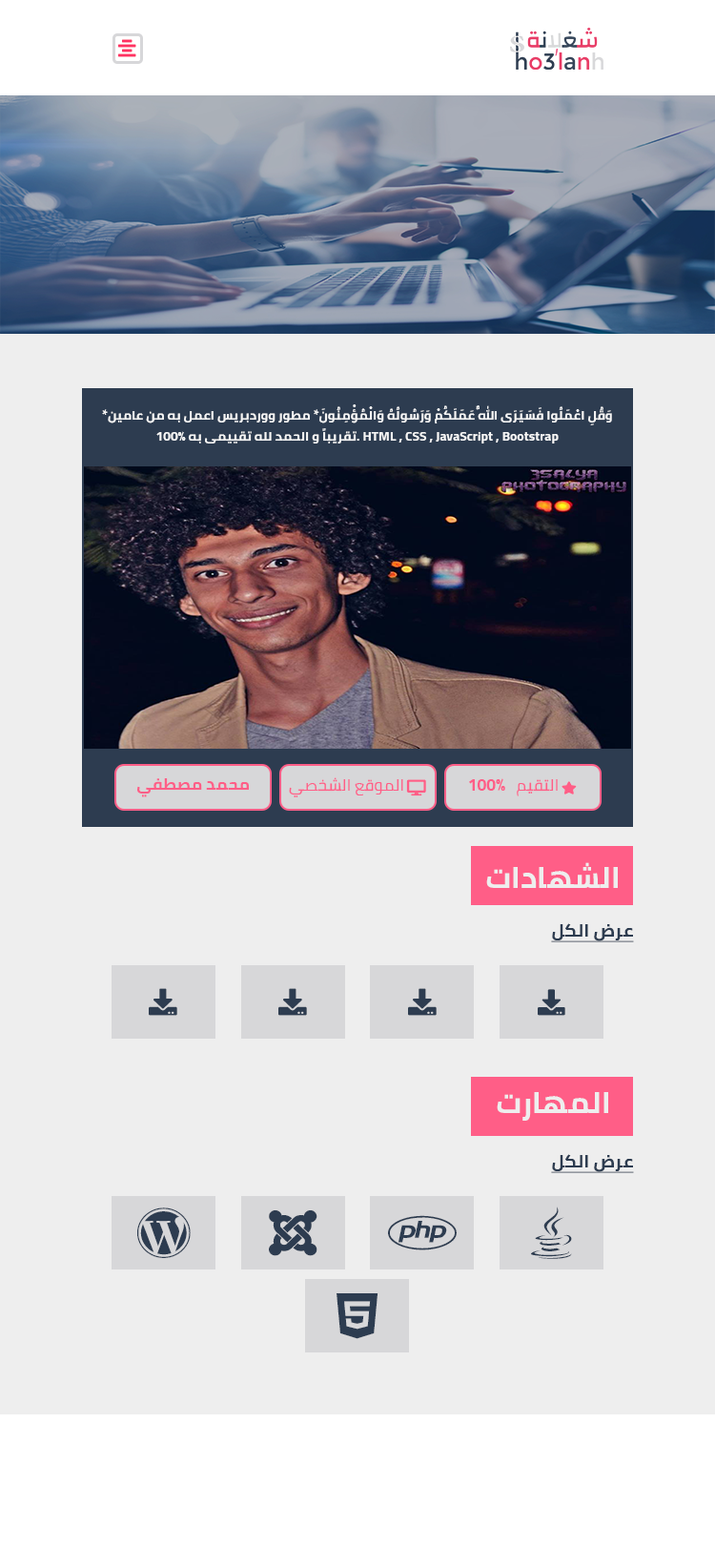
<style>
.page{position:relative;width:715px;height:1568px;background:#eeeeee}
.page>*{position:absolute;margin:0}
.t1{font:12.4px/21px "Cairo-Bold";color:#f7f7f7;scale:1.06 1}
.t2{font:15.7px "Cairo-Bold";color:#ff5e87;scale:1.06 1}
.t3{font:15.7px "Cairo";color:#ff5e87;scale:1.06 1}
.t4{font:29.3px "Cairo-Bold";color:#eeeeee;text-transform:uppercase;scale:1.06 1}
.t5{font:17.2px "Cairo-Bold";color:#2d3c50;text-transform:uppercase;text-decoration:underline;scale:1.06 1}
</style>
<div class="page">
<p class="t1" style="left:102px;top:404px;width:510px;height:40px;text-align:center">*وَقُلِ اعْمَلُوا فَسَيَرَى اللَّهُ عَمَلَكُمْ وَرَسُولُهُ وَالْمُؤْمِنُونَ* مطور ووردبريس اعمل به من عامين تقريباً و الحمد لله تقييمى به 100%. HTML , CSS , JavaScript , Bootstrap</p>
<p class="t2" style="left:137px;top:778px;width:112px;height:19px">محمد مصطفي</p>
<p class="t3" style="left:289px;top:777px;width:114px;height:20px">الموقع الشخصي</p>
<p class="t3" style="left:469px;top:778px;width:89px;height:18px">التقيم<span class="t2">   100%</span></p>
<p class="t4" style="left:486px;top:862px;width:132px;height:26px">الشهادات</p>
<p class="t5" style="left:551px;top:923px;width:83px;height:19px">عرض الكل</p>
<p class="t4" style="left:497px;top:1092px;width:112px;height:29px">المهارت</p>
<p class="t5" style="left:551px;top:1154px;width:83px;height:19px">عرض الكل</p>
</div>
